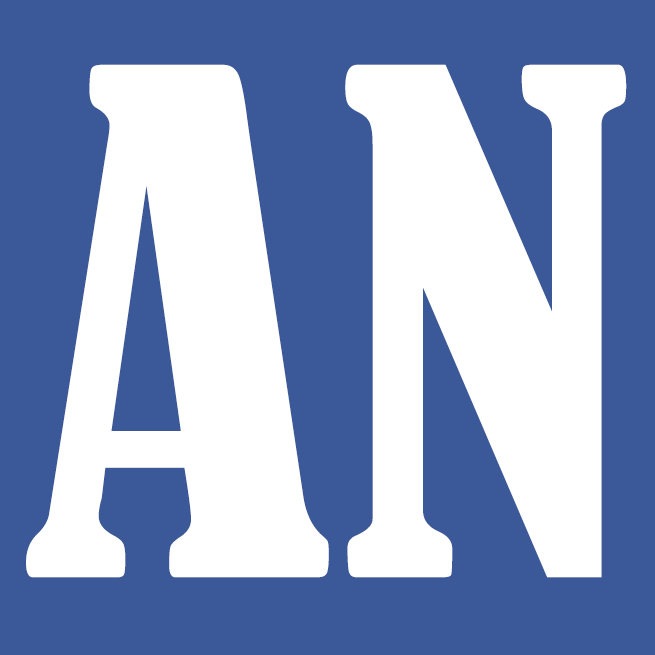
<style>
.page{position:relative;width:655px;height:655px;background:#3b5998}
.page>*{position:absolute;margin:0}
.t1{font:650px "BernardMT-Condensed";color:#ffffff}
</style>
<div class="page">
<p class="t1" style="left:26px;top:64px;width:601px;height:514px">AN</p>
</div>
